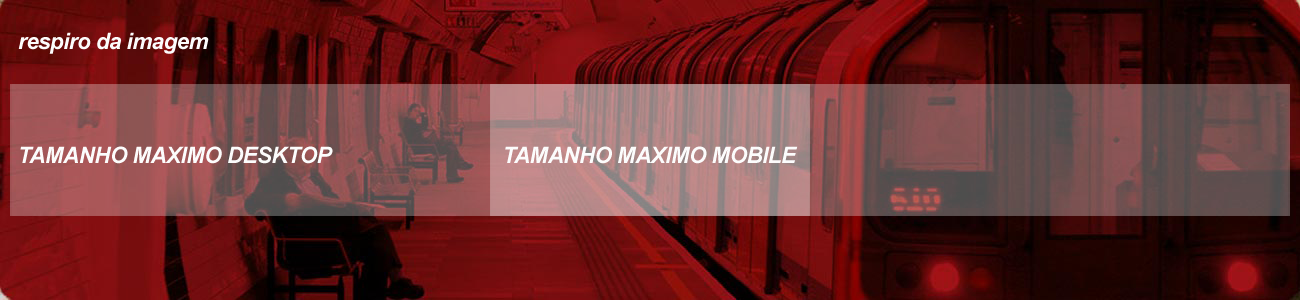
<style>
.page{position:relative;width:1300px;height:300px}
.page>*{position:absolute;margin:0}
.t1{font:22.4px "Arial-BoldItalicMT";letter-spacing:-0.025em;color:#fcfcfc}
</style>
<div class="page">
<p class="t1" style="left:18px;top:32px;width:191px;height:22px">respiro da imagem</p>
<p class="t1" style="left:20px;top:146px;width:313px;height:18px">TAMANHO MAXIMO DESKTOP</p>
<p class="t1" style="left:505px;top:146px;width:293px;height:18px">TAMANHO MAXIMO MOBILE</p>
</div>
